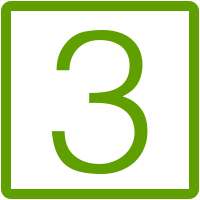
<style>
.page{position:relative;width:200px;height:200px;background:#ffffff}
.page>*{position:absolute;margin:0}
.t1{font:200px "Helvetica-Light";color:#5fa000}
</style>
<div class="page">
<p class="t1" style="left:51px;top:30px;width:97px;height:144px">3</p>
</div>
